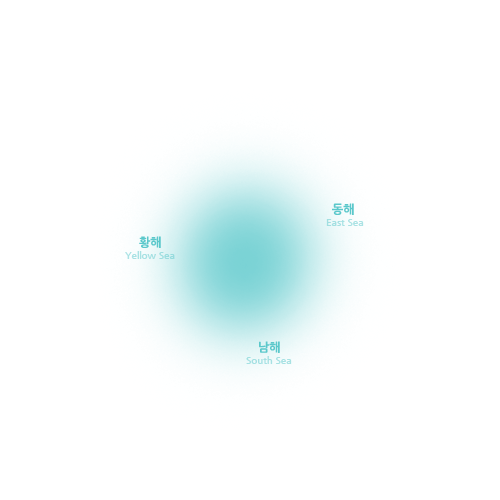
<style>
.page{position:relative;width:500px;height:500px;background:#ffffff}
.page>*{position:absolute;margin:0}
.t1{font:12px "NanumGothicBold";color:#5bc8cb}
.t2{font:10px "NanumGothicBold";color:#a5e1e2}
.t3{font:10px "NanumGothicBold";color:#a6e1e3}
</style>
<div class="page">
<p class="t1" style="left:332px;top:203px;width:22px;height:12px">동해</p>
<p class="t2" style="left:326px;top:219px;width:38px;height:7px">East Sea</p>
<p class="t1" style="left:139px;top:236px;width:22px;height:12px">황해</p>
<p class="t3" style="left:125px;top:251px;width:50px;height:8px">Yellow Sea</p>
<p class="t1" style="left:259px;top:341px;width:21px;height:12px">남해</p>
<p class="t3" style="left:246px;top:356px;width:46px;height:8px">South Sea</p>
</div>
